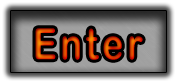
<style>
.page{position:relative;width:178px;height:84px}
.page>*{position:absolute;margin:0}
.t1{font:43.2px "ArialRoundedMTBold";letter-spacing:0.1em;scale:0.83 1}
</style>
<div class="page">
<p class="t1" style="left:35px;top:28px;width:108px;height:32px">Enter</p>
</div>
